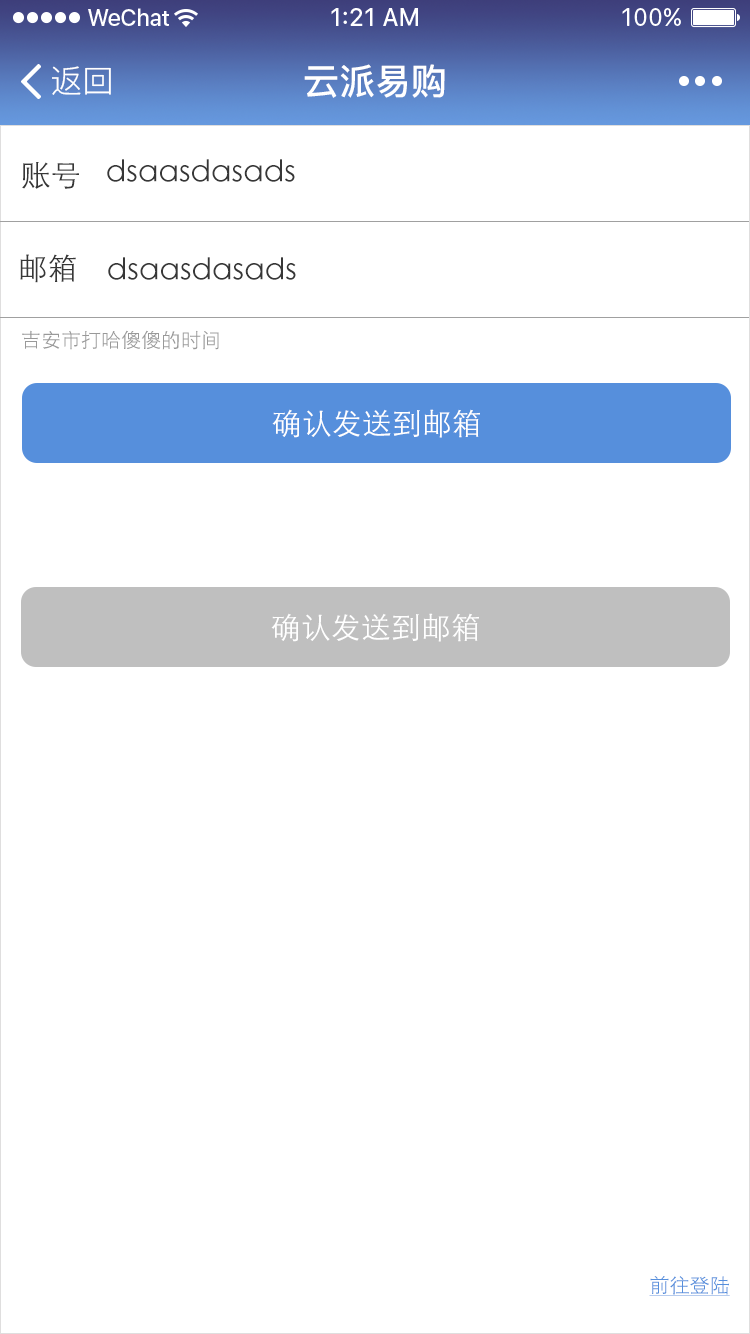
<style>
.page{position:relative;width:750px;height:1334px;background:#ffffff}
.page>*{position:absolute;margin:0}
.t1{font:36px "PingFang-SC-Bold";color:#ffffff}
.t2{font:32px "PingFang-SC-Regular";color:#ffffff}
.t3{font:30px "STXihei";color:#373737}
.t4{font:20px "STXihei";color:#999999}
.t5{font:30px "STXihei";color:#ffffff}
.t6{font:20px "STXihei";color:#568fdc;text-decoration:underline}
</style>
<div class="page">
<p class="t1" style="left:304px;top:64px;width:141px;height:34px">云派易购</p>
<p class="t2" style="left:52px;top:66px;width:59px;height:29px">返回</p>
<p class="t3" style="left:107px;top:159px;width:188px;height:23px">dsaasdasads</p>
<p class="t3" style="left:22px;top:162px;width:57px;height:27px">账号</p>
<p class="t3" style="left:20px;top:254px;width:56px;height:29px">邮箱</p>
<p class="t3" style="left:108px;top:257px;width:188px;height:23px">dsaasdasads</p>
<p class="t4" style="left:22px;top:330px;width:197px;height:20px">吉安市打哈傻傻的时间</p>
<p class="t5" style="left:272px;top:409px;width:208px;height:29px">确认发送到邮箱</p>
<p class="t5" style="left:271px;top:613px;width:208px;height:29px">确认发送到邮箱</p>
<p class="t6" style="left:649px;top:1276px;width:81px;height:20px">前往登陆</p>
</div>
